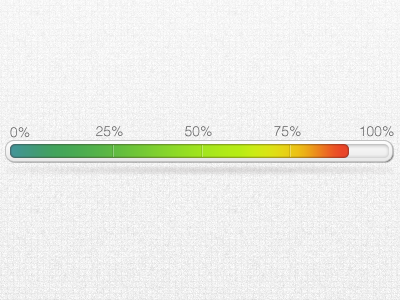
<style>
.page{position:relative;width:400px;height:300px}
.page>*{position:absolute;margin:0}
.t1{font:14px "Helvetica-Light"}
</style>
<div class="page">
<p class="t1" style="left:96px;top:126px;width:27px;height:11px">25%</p>
<p class="t1" style="left:185px;top:126px;width:27px;height:11px">50%</p>
<p class="t1" style="left:274px;top:126px;width:27px;height:11px">75%</p>
<p class="t1" style="left:360px;top:126px;width:34px;height:11px">100%</p>
<p class="t1" style="left:10px;top:127px;width:20px;height:11px">0%</p>
</div>
